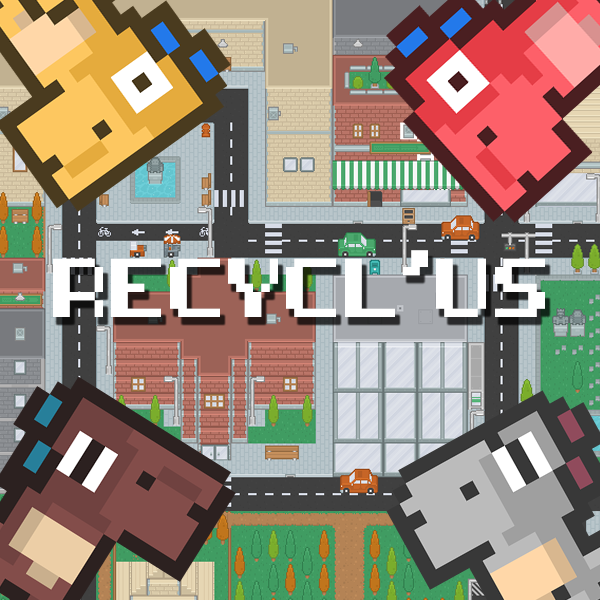
<style>
.page{position:relative;width:600px;height:600px}
.page>*{position:absolute;margin:0}
.t1{font:50px "8-bit-pusab";color:#ffffff}
</style>
<div class="page">
<p class="t1" style="left:53px;top:250px;width:492px;height:67px">RECYCL’US</p>
</div>
